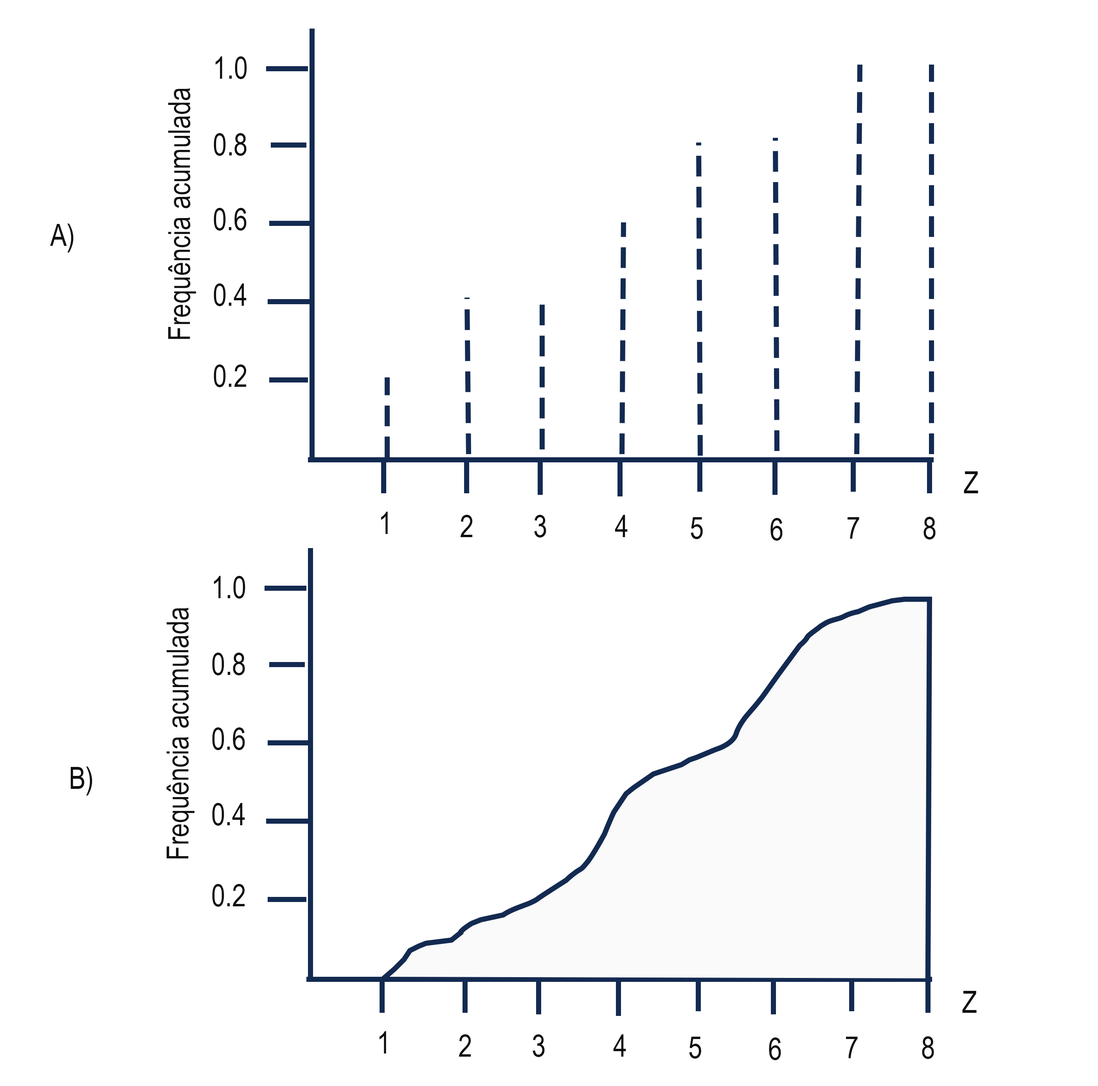
<style>
.page{position:relative;width:1098px;height:1086px;background:#ffffff}
.page>*{position:absolute;margin:0}
.t1{font:52.2px "ArialNarrow";color:#0d0f0d}
</style>
<div class="page">
<p class="t1" style="left:215px;top:56px;width:32px;height:23px">1.0</p>
<p class="t1" style="left:168px;top:88px;width:28px;height:251px;rotate:-90deg">Frequência acumulada</p>
<p class="t1" style="left:214px;top:133px;width:33px;height:23px">0.8</p>
<p class="t1" style="left:214px;top:208px;width:33px;height:23px">0.6</p>
<p class="t1" style="left:50px;top:223px;width:24px;height:29px">A)</p>
<p class="t1" style="left:214px;top:283px;width:33px;height:23px">0.4</p>
<p class="t1" style="left:214px;top:364px;width:33px;height:23px">0.2</p>
<p class="t1" style="left:964px;top:471px;width:14px;height:22px">Z</p>
<p class="t1" style="left:381px;top:512px;width:7px;height:22px">1</p>
<p class="t1" style="left:460px;top:515px;width:13px;height:22px">2</p>
<p class="t1" style="left:534px;top:515px;width:12px;height:22px">3</p>
<p class="t1" style="left:615px;top:515px;width:13px;height:22px">4</p>
<p class="t1" style="left:691px;top:517px;width:12px;height:22px">5</p>
<p class="t1" style="left:771px;top:518px;width:12px;height:23px">6</p>
<p class="t1" style="left:848px;top:517px;width:12px;height:22px">7</p>
<p class="t1" style="left:924px;top:517px;width:12px;height:22px">8</p>
<p class="t1" style="left:214px;top:576px;width:31px;height:22px">1.0</p>
<p class="t1" style="left:166px;top:607px;width:29px;height:251px;rotate:-90deg">Frequência acumulada</p>
<p class="t1" style="left:212px;top:652px;width:33px;height:23px">0.8</p>
<p class="t1" style="left:212px;top:727px;width:33px;height:23px">0.6</p>
<p class="t1" style="left:70px;top:766px;width:22px;height:29px">B)</p>
<p class="t1" style="left:212px;top:803px;width:33px;height:22px">0.4</p>
<p class="t1" style="left:212px;top:884px;width:33px;height:22px">0.2</p>
<p class="t1" style="left:962px;top:991px;width:15px;height:22px">Z</p>
<p class="t1" style="left:379px;top:1031px;width:7px;height:22px">1</p>
<p class="t1" style="left:459px;top:1034px;width:12px;height:22px">2</p>
<p class="t1" style="left:533px;top:1034px;width:12px;height:23px">3</p>
<p class="t1" style="left:613px;top:1034px;width:13px;height:22px">4</p>
<p class="t1" style="left:689px;top:1036px;width:12px;height:22px">5</p>
<p class="t1" style="left:769px;top:1037px;width:12px;height:23px">6</p>
<p class="t1" style="left:846px;top:1036px;width:12px;height:22px">7</p>
<p class="t1" style="left:922px;top:1036px;width:12px;height:23px">8</p>
</div>
